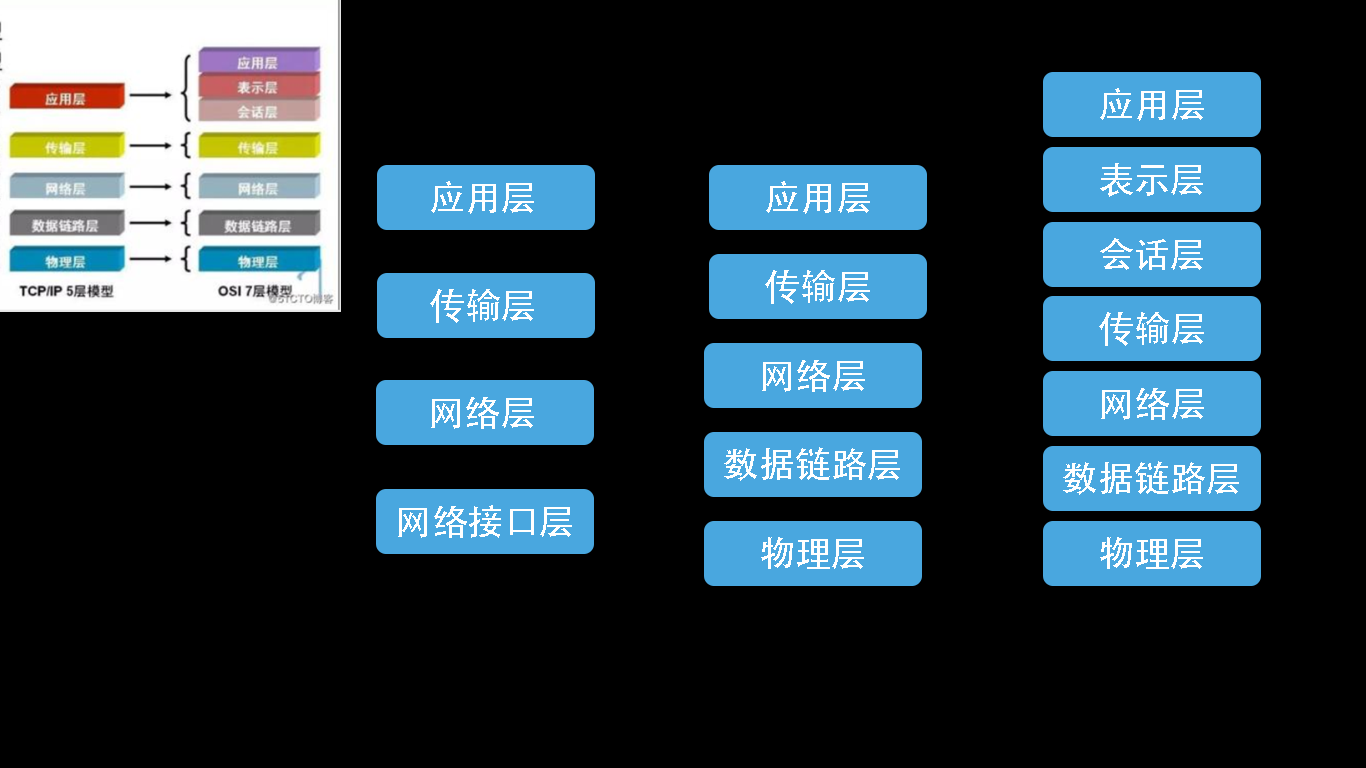
<style>
.page{position:relative;width:1366px;height:768px;background:#000000}
.page>*{position:absolute;margin:0}
.t1{font:36px "AdobeHeitiStd-Regular";color:#ffffff}
</style>
<div class="page">
<p class="t1" style="left:1100px;top:88px;width:104px;height:33px">应用层</p>
<p class="t1" style="left:1100px;top:163px;width:103px;height:34px">表示层</p>
<p class="t1" style="left:431px;top:181px;width:103px;height:33px">应用层</p>
<p class="t1" style="left:766px;top:181px;width:104px;height:33px">应用层</p>
<p class="t1" style="left:1100px;top:238px;width:103px;height:32px">会话层</p>
<p class="t1" style="left:765px;top:270px;width:105px;height:34px">传输层</p>
<p class="t1" style="left:430px;top:289px;width:104px;height:34px">传输层</p>
<p class="t1" style="left:1099px;top:312px;width:105px;height:34px">传输层</p>
<p class="t1" style="left:762px;top:360px;width:103px;height:32px">网络层</p>
<p class="t1" style="left:1101px;top:388px;width:103px;height:32px">网络层</p>
<p class="t1" style="left:431px;top:397px;width:103px;height:32px">网络层</p>
<p class="t1" style="left:724px;top:447px;width:176px;height:34px">数据链路层</p>
<p class="t1" style="left:1063px;top:461px;width:176px;height:34px">数据链路层</p>
<p class="t1" style="left:398px;top:505px;width:174px;height:33px">网络接口层</p>
<p class="t1" style="left:761px;top:537px;width:103px;height:32px">物理层</p>
<p class="t1" style="left:1100px;top:537px;width:103px;height:32px">物理层</p>
</div>
